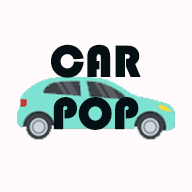
<style>
.page{position:relative;width:192px;height:192px;background:#fffafb}
.page>*{position:absolute;margin:0}
.t1{font:46.6px "Bauhaus93";color:#051014}
</style>
<div class="page">
<p class="t1" style="left:51px;top:44px;width:90px;height:34px">CAR</p>
<p class="t1" style="left:53px;top:97px;width:86px;height:33px">POP</p>
</div>
